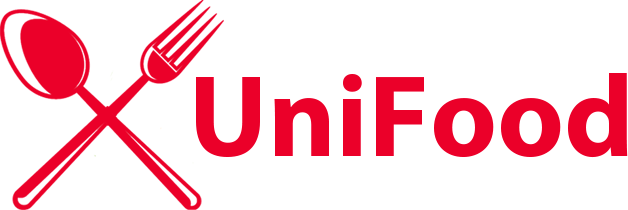
<style>
.page{position:relative;width:628px;height:210px;background:#ffffff}
.page>*{position:absolute;margin:0}
.t1{font:116.8px "MyriadPro-Bold";color:#eb0029}
</style>
<div class="page">
<p class="t1" style="left:196px;top:73px;width:432px;height:85px">UniFood</p>
</div>
